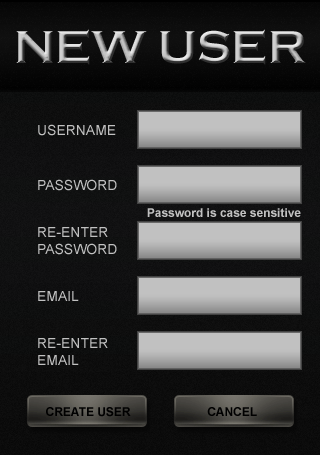
<style>
.page{position:relative;width:320px;height:455px}
.page>*{position:absolute;margin:0}
.t1{font:47.8px "CopperplateGothic-Bold"}
.t2{font:13.9px "ArialMT";color:#c1c1c1}
.t3{font:12px "Arial-BoldMT";color:#c1c1c1}
.t4{font:12px "Arial-BoldMT";color:#000000}
</style>
<div class="page">
<p class="t1" style="left:16px;top:29px;width:290px;height:36px">NEW USER</p>
<p class="t2" style="left:38px;top:124px;width:78px;height:12px">USERNAME</p>
<p class="t2" style="left:38px;top:179px;width:79px;height:12px">PASSWORD</p>
<p class="t3" style="left:147px;top:208px;width:154px;height:9px">Password is case sensitive</p>
<p class="t2" style="left:38px;top:227px;width:79px;height:28px">RE-ENTER<br>PASSWORD</p>
<p class="t2" style="left:38px;top:291px;width:41px;height:10px">EMAIL</p>
<p class="t2" style="left:38px;top:338px;width:70px;height:27px">RE-ENTER<br>EMAIL</p>
<p class="t4" style="left:46px;top:407px;width:85px;height:10px">CREATE USER</p>
<p class="t4" style="left:207px;top:407px;width:50px;height:9px">CANCEL</p>
</div>
